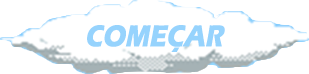
<style>
.page{position:relative;width:309px;height:74px;background:#ffffff}
.page>*{position:absolute;margin:0}
.t1{font:31.2px "ErasITC-Bold";color:#96d3fd;font-style:italic;scale:0.83 1}
</style>
<div class="page">
<p class="t1" style="left:87px;top:25px;width:138px;height:27px">COMEÇAR</p>
</div>
